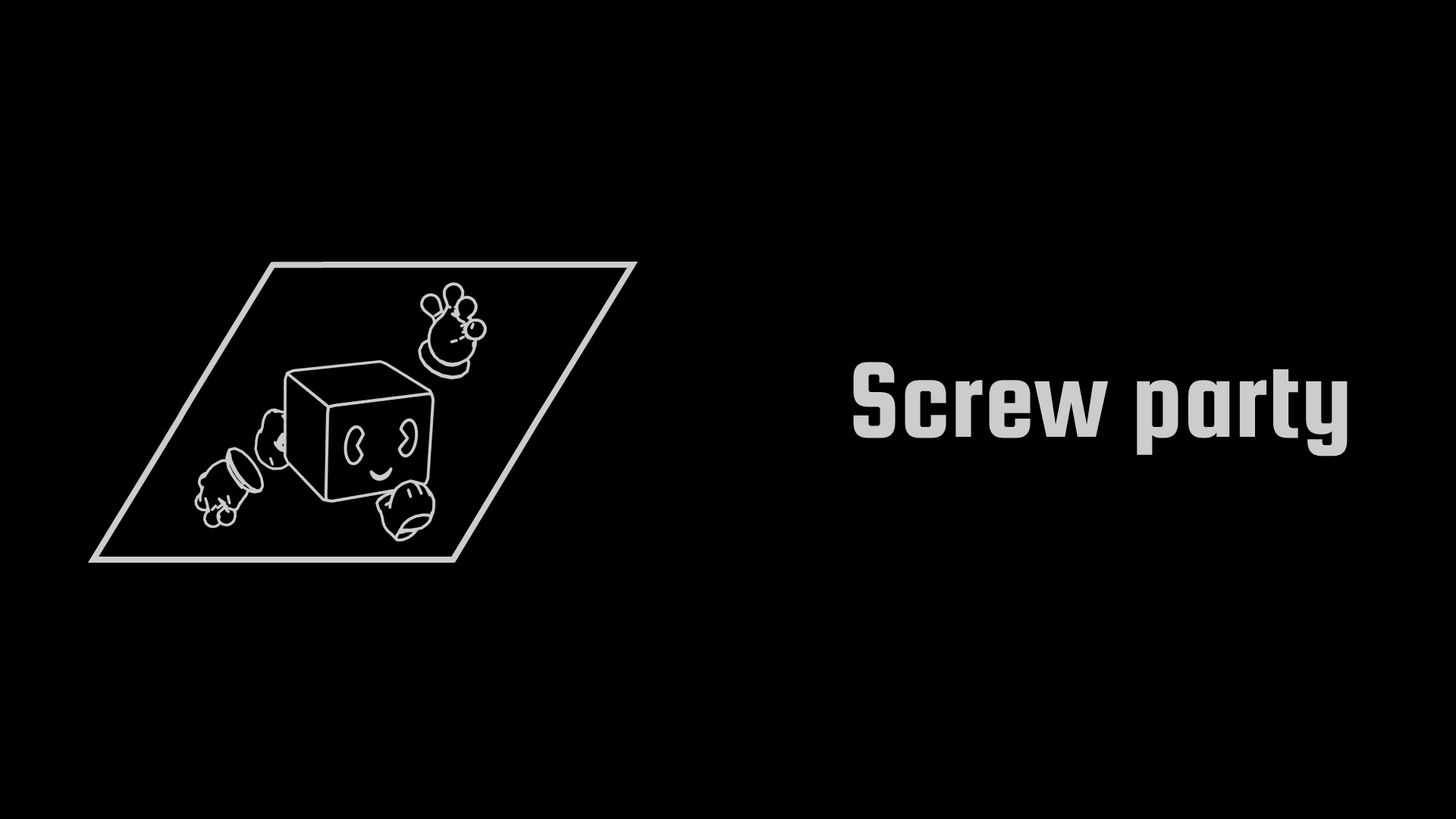
<style>
.page{position:relative;width:1456px;height:819px;background:#000000}
.page>*{position:absolute;margin:0}
.t1{font:113.7px "SquadaOne-Regular";color:#cccccc}
</style>
<div class="page">
<p class="t1" style="left:853px;top:362px;width:495px;height:95px">Screw party</p>
</div>
